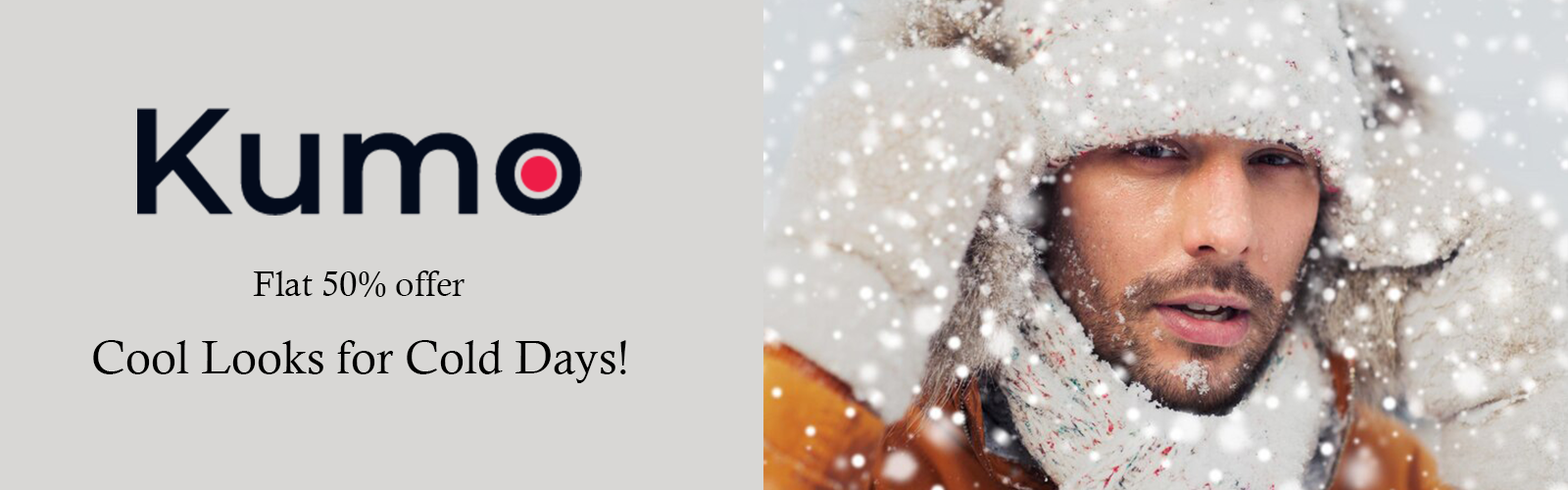
<style>
.page{position:relative;width:1568px;height:490px;background:#d8d7d5}
.page>*{position:absolute;margin:0}
.t1{font:35.3px "CalistoMT";color:#000000}
.t2{font:47px "CalistoMT";color:#000000}
</style>
<div class="page">
<p class="t1" style="left:253px;top:270px;width:212px;height:27px">Flat 50% offer</p>
<p class="t2" style="left:93px;top:340px;width:533px;height:43px">Cool Looks for Cold Days!</p>
</div>
